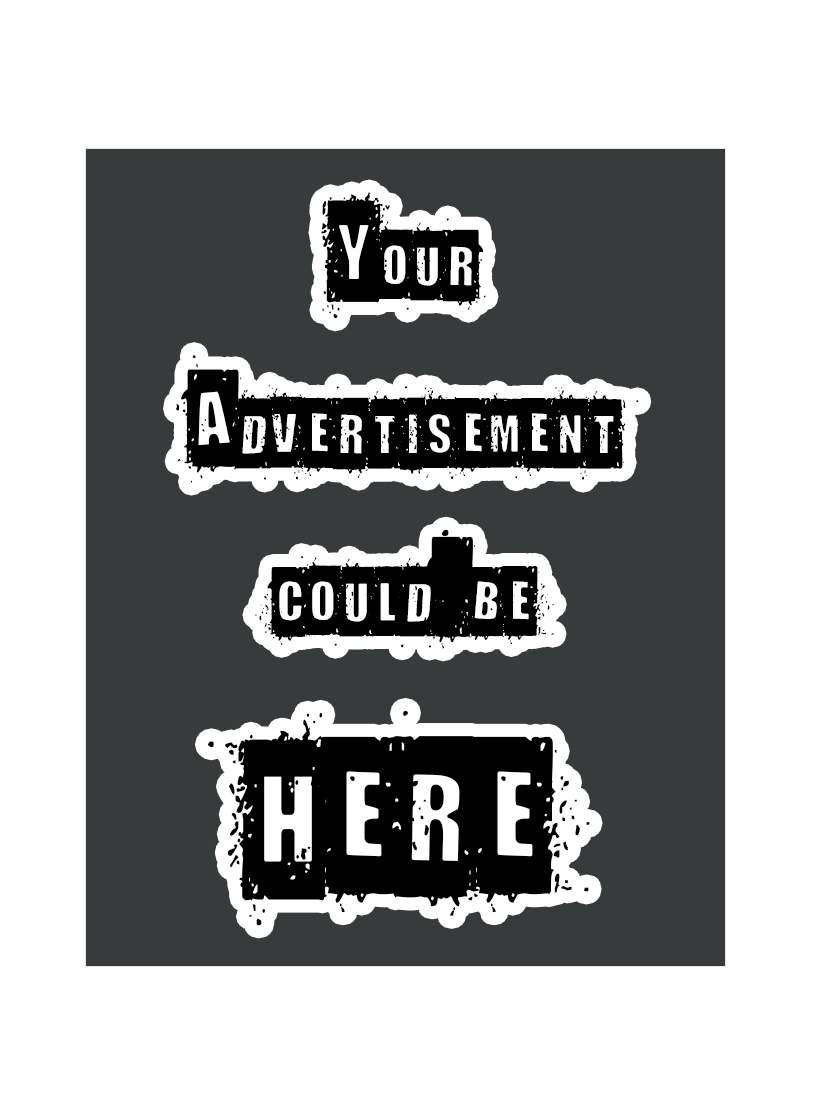
<style>
.page{position:relative;width:815px;height:1110px;background:#ffffff}
.page>*{position:absolute;margin:0}
.t1{font:140px "DistortYouALesson";color:#000000;font-variant:small-caps}
.t2{font:220px "DistortYouALesson";color:#000000;font-variant:small-caps}
</style>
<div class="page">
<p class="t1" style="left:175px;top:192px;width:464px;height:457px;text-align:center">Your<br>Advertisement<br>could be</p>
<p class="t2" style="left:207px;top:711px;width:383px;height:215px">HERE</p>
</div>
